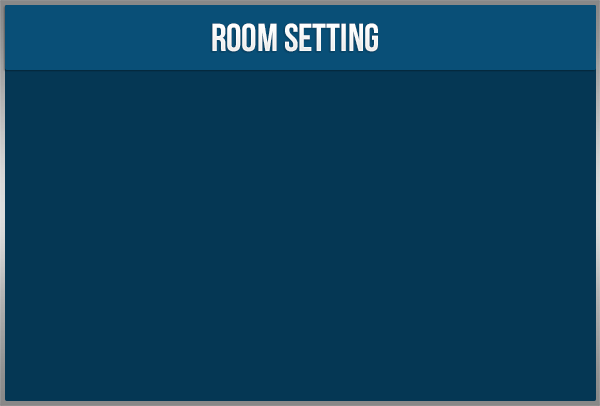
<style>
.page{position:relative;width:600px;height:406px;background:#053754}
.page>*{position:absolute;margin:0}
.t1{font:38.8px "UTM-Bebas";color:#ffffff}
</style>
<div class="page">
<p class="t1" style="left:212px;top:23px;width:166px;height:29px">room setting</p>
</div>
